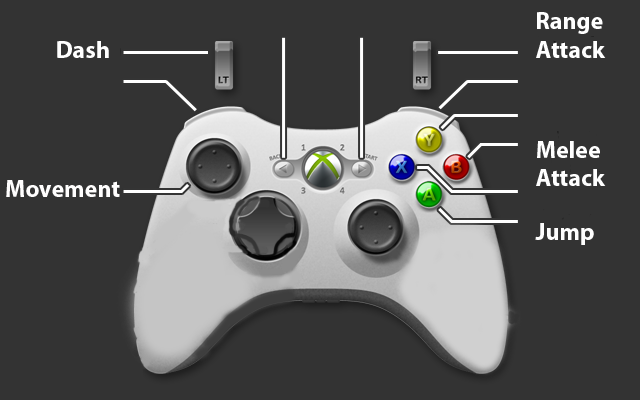
<style>
.page{position:relative;width:640px;height:400px;background:#333333}
.page>*{position:absolute;margin:0}
.t1{font:24px "MyriadPro-Bold";color:#ffffff}
.t2{font:24px "MyriadPro-Bold";color:#fffefe}
.t3{font:24px "MyriadPro-Bold";color:#fefefe}
</style>
<div class="page">
<p class="t1" style="left:536px;top:12px;width:70px;height:46px">Range<br>Attack</p>
<p class="t1" style="left:57px;top:41px;width:52px;height:17px">Dash</p>
<p class="t1" style="left:536px;top:141px;width:70px;height:45px">Melee<br>Attack</p>
<p class="t2" style="left:6px;top:180px;width:114px;height:17px">Movement</p>
<p class="t3" style="left:535px;top:223px;width:59px;height:22px">Jump</p>
</div>
